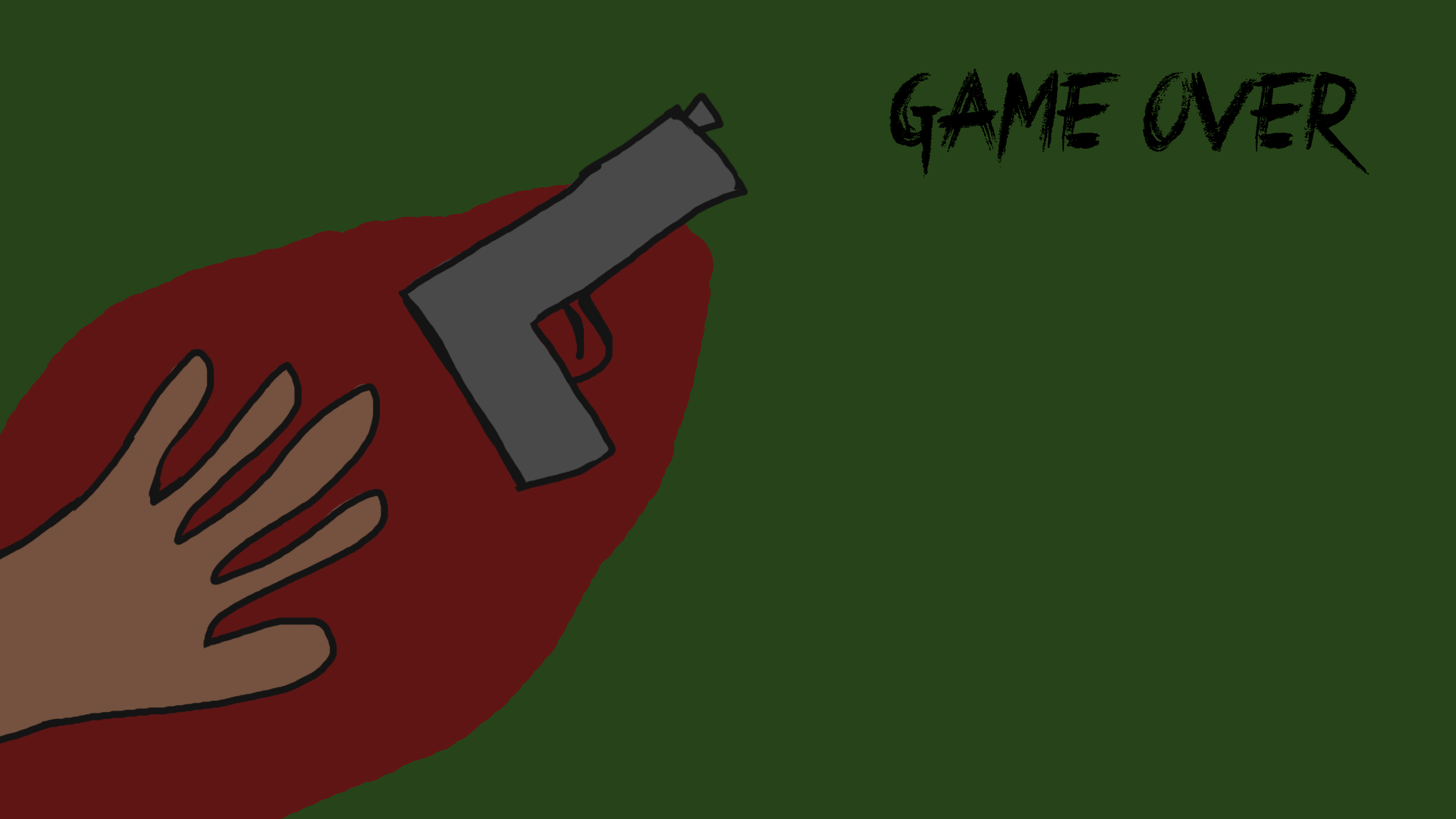
<style>
.page{position:relative;width:1456px;height:819px;background:#274319}
.page>*{position:absolute;margin:0}
.t1{font:113.7px "CrimesTimesSix";color:#000000}
</style>
<div class="page">
<p class="t1" style="left:889px;top:68px;width:481px;height:111px">Game Over</p>
</div>
